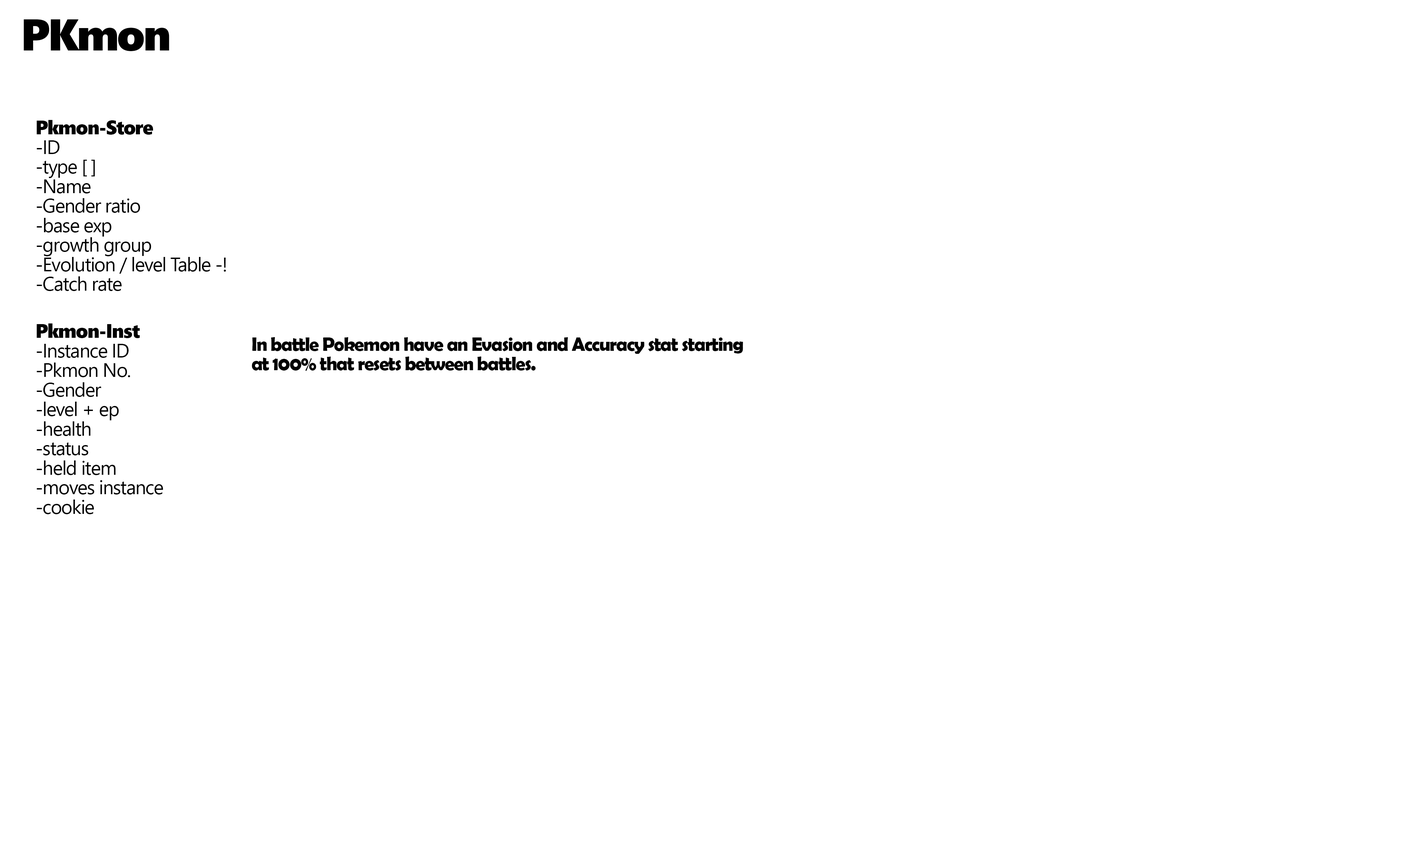
<style>
.page{position:relative;width:1416px;height:842px;background:#ffffff}
.page>*{position:absolute;margin:0}
.t1{font:44.4px "SegoeUIBlack";letter-spacing:-0.043em;color:#000000}
.t2{font:19.5px/19.5px "SegoeUI";letter-spacing:-0.043em;color:#000000}
.t3{font:19.5px/19.5px "SegoeUIBlack";letter-spacing:-0.043em;color:#000000}
.t4{font:19.5px/19.5px "BerlinSansFBDemi-Bold";letter-spacing:-0.043em;color:#000000}
</style>
<div class="page">
<p class="t1" style="left:24px;top:19px;width:145px;height:32px">PKmon</p>
<p class="t2" style="left:37px;top:120px;width:189px;height:171px"><span class="t3">Pkmon-Store<br></span>-ID<br>-type [ ]<br>-Name<br>-Gender ratio<br>-base exp<br>-growth group<br>-Evolution / level Table -!<br>-Catch rate</p>
<p class="t2" style="left:37px;top:323px;width:126px;height:191px"><span class="t3">Pkmon-Inst<br></span>-Instance ID<br>-Pkmon No.<br>-Gender<br>-level + ep<br>-health<br>-status<br>-held item<br>-moves instance<br>-cookie</p>
<p class="t4" style="left:252px;top:337px;width:491px;height:34px">In battle Pokemon have an Evasion and Accuracy stat starting <br>at 100% that resets between battles.</p>
</div>
